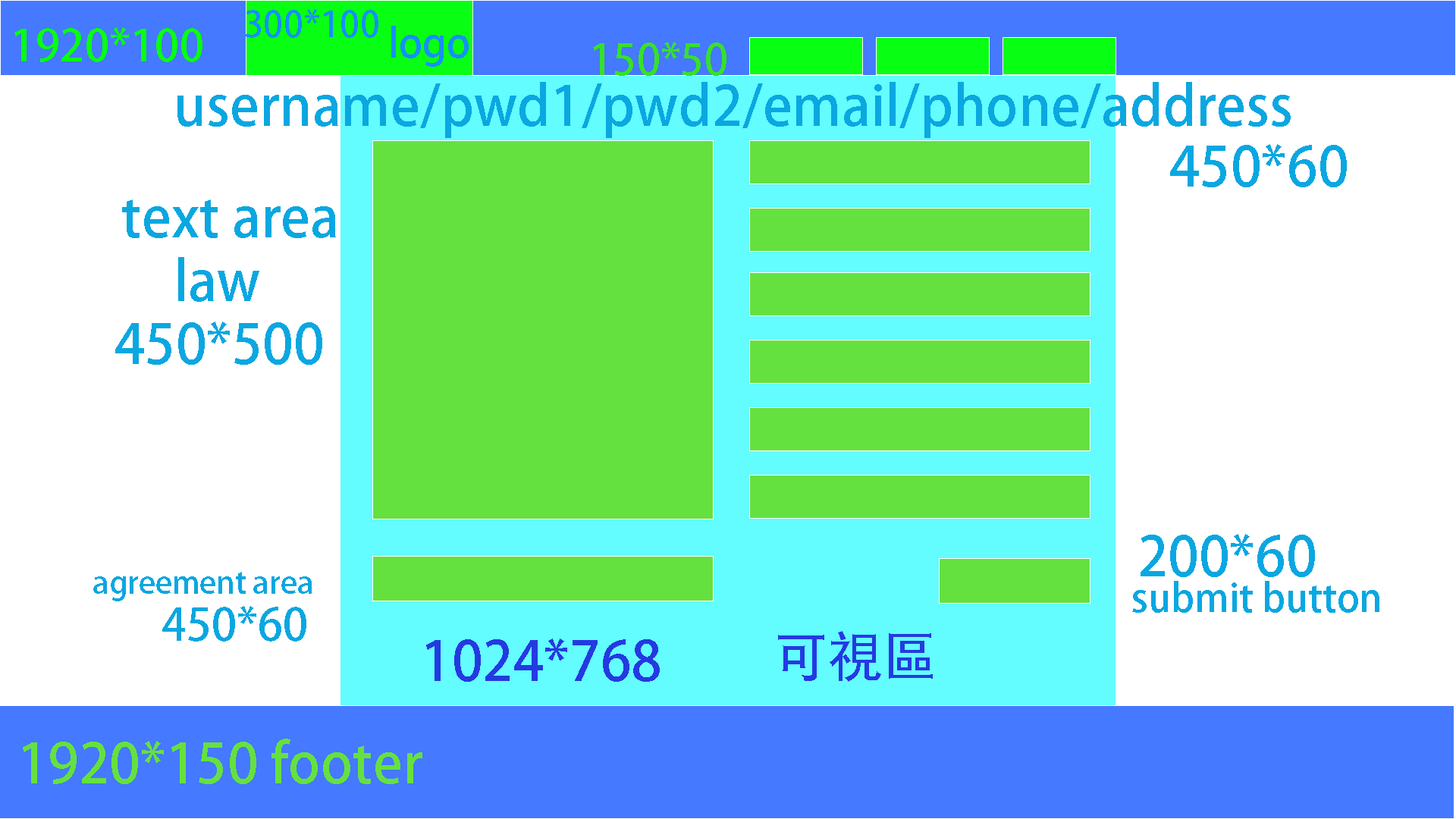
<style>
.page{position:relative;width:1456px;height:819px;background:#ffffff}
.page>*{position:absolute;margin:0}
.t1{font:35.7px "AdobeHeitiStd-Regular";color:#178fff}
.t2{font:43.9px "AdobeHeitiStd-Regular";color:#08ff14}
.t3{font:39.8px "AdobeHeitiStd-Regular";color:#178fff}
.t4{font:42.3px "AdobeHeitiStd-Regular";color:#36e129}
.t5{font:54.6px "AdobeHeitiStd-Regular";color:#0aa7e1}
.t6{font:30.6px "AdobeHeitiStd-Regular";color:#0aa7e1}
.t7{font:38.4px "AdobeHeitiStd-Regular";color:#0aa7e1}
.t8{font:44.8px "AdobeHeitiStd-Regular";color:#0aa7e1}
.t9{font:54.6px "AdobeHeitiStd-Regular";color:#243ae1}
.t10{font:54.6px "AdobeHeitiStd-Regular";color:#65e13f}
</style>
<div class="page">
<p class="t1" style="left:246px;top:9px;width:132px;height:29px">300*100</p>
<p class="t2" style="left:14px;top:27px;width:188px;height:35px">1920*100</p>
<p class="t3" style="left:391px;top:26px;width:78px;height:41px">logo</p>
<p class="t4" style="left:593px;top:42px;width:133px;height:34px">150*50</p>
<p class="t5" style="left:177px;top:82px;width:1114px;height:56px">username/pwd1/pwd2/email/phone/address</p>
<p class="t5" style="left:1170px;top:144px;width:177px;height:43px">450*60</p>
<p class="t5" style="left:122px;top:199px;width:214px;height:39px">text area</p>
<p class="t5" style="left:178px;top:257px;width:81px;height:45px">law</p>
<p class="t5" style="left:115px;top:322px;width:207px;height:43px">450*500</p>
<p class="t5" style="left:1141px;top:534px;width:174px;height:43px">200*60</p>
<p class="t6" style="left:93px;top:572px;width:219px;height:29px">agreement area</p>
<p class="t7" style="left:1132px;top:581px;width:247px;height:32px">submit button</p>
<p class="t8" style="left:162px;top:606px;width:144px;height:36px">450*60</p>
<p class="t9" style="left:426px;top:639px;width:234px;height:43px">1024*768</p>
<p class="t9" style="left:778px;top:631px;width:155px;height:51px">可視區</p>
<p class="t10" style="left:23px;top:739px;width:399px;height:45px">1920*150 footer</p>
</div>
